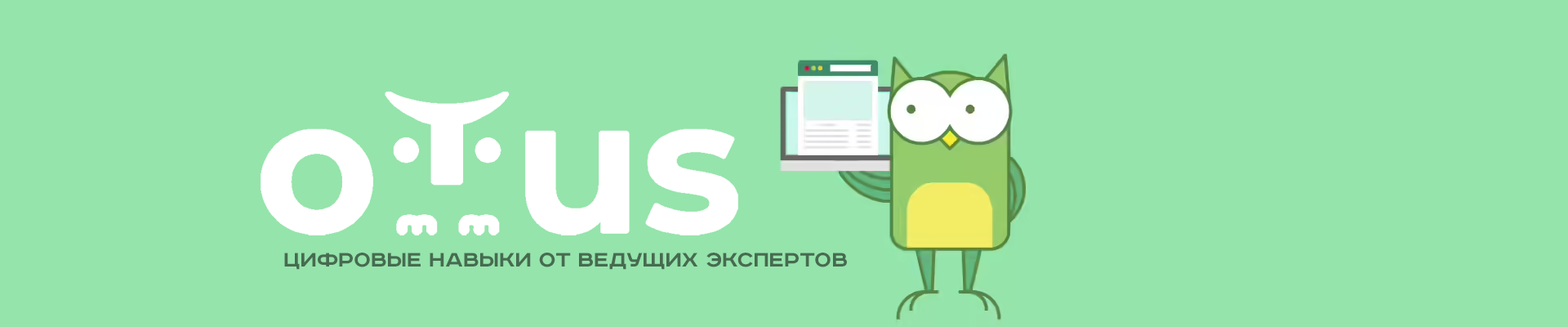
<style>
.page{position:relative;width:1568px;height:327px;background:#95e4ab}
.page>*{position:absolute;margin:0}
.t1{font:24.5px "RoadRadio-Bold";color:#466b50}
</style>
<div class="page">
<p class="t1" style="left:284px;top:252px;width:563px;height:18px">Цифровые навыки от ведущих экспертов</p>
</div>
